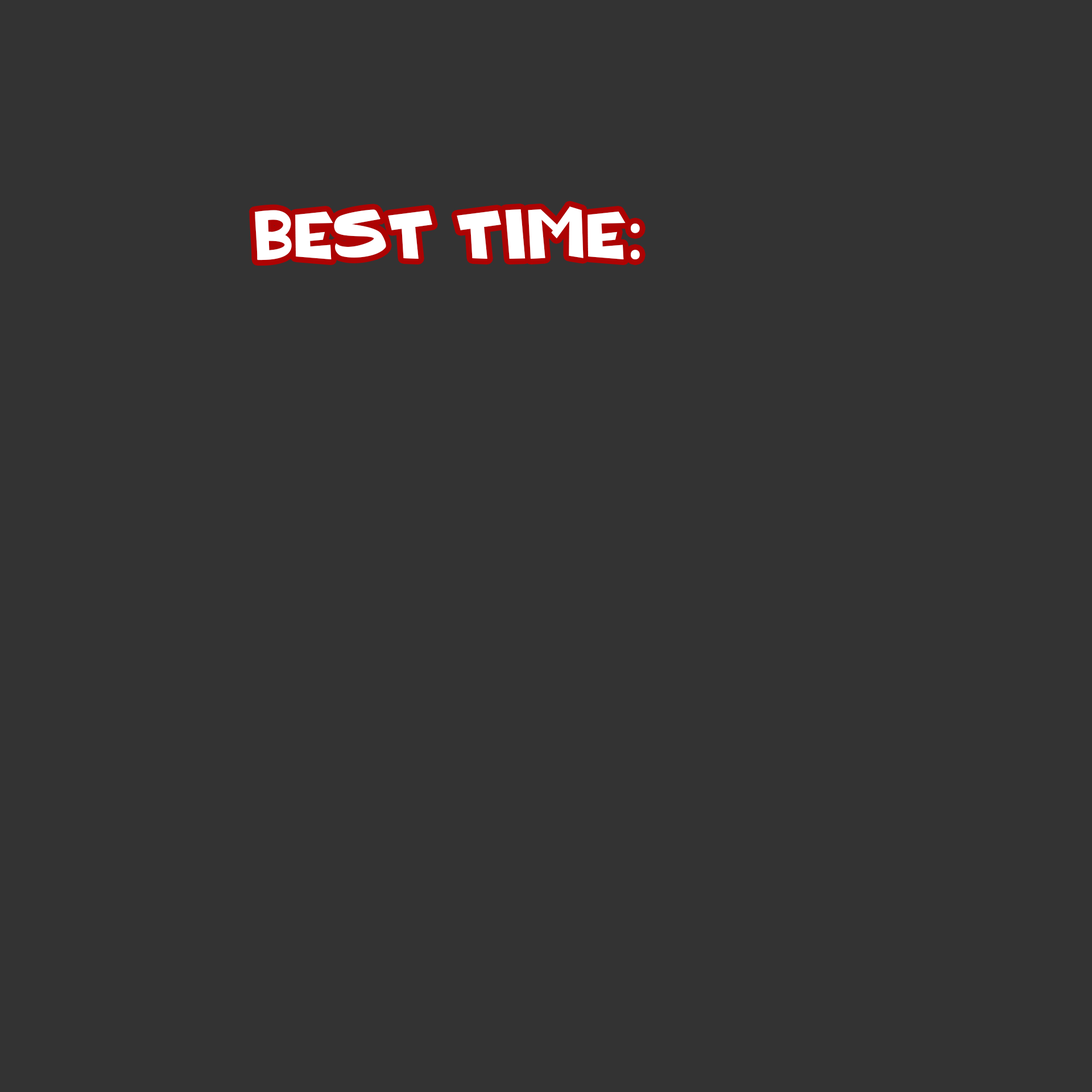
<style>
.page{position:relative;width:1092px;height:1092px;background:#333333}
.page>*{position:absolute;margin:0}
.t1{font:75.8px "BLOCKHEADDUDEPersonalUse";color:#ffffff}
.t2{font:75.8px "MyriadPro-Regular";color:#ffffff}
</style>
<div class="page">
<p class="t1" style="left:254px;top:206px;width:386px;height:54px">Best Time<span class="t2">:</span></p>
</div>
